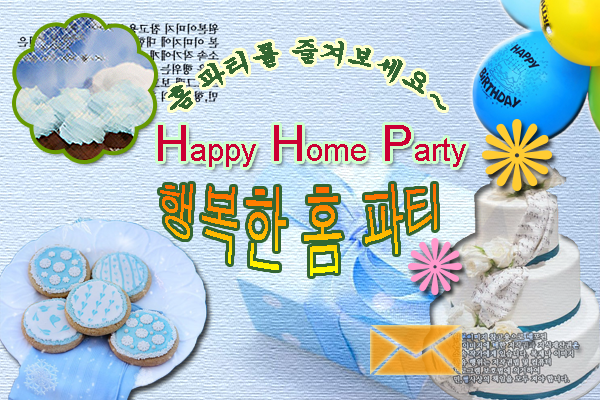
<style>
.page{position:relative;width:600px;height:400px}
.page>*{position:absolute;margin:0}
.t1{font:25px "Gungsuh";color:#336633}
.t2{font:32px "ArialMT";color:#cc0033}
.t3{font:50px "ArialMT";color:#cc0033}
.t4{font:43px "Dotum"}
</style>
<div class="page">
<p class="t1" style="left:168px;top:39px;width:278px;height:71px;text-align:center">홈 파티를 즐겨보세요~</p>
<p class="t2" style="left:158px;top:125px;width:308px;height:42px"><span class="t3">H</span>appy<span class="t3"> H</span>ome<span class="t3"> P</span>arty</p>
<p class="t4" style="left:160px;top:184px;width:277px;height:92px;text-align:center">행복한 홈 파티</p>
</div>
